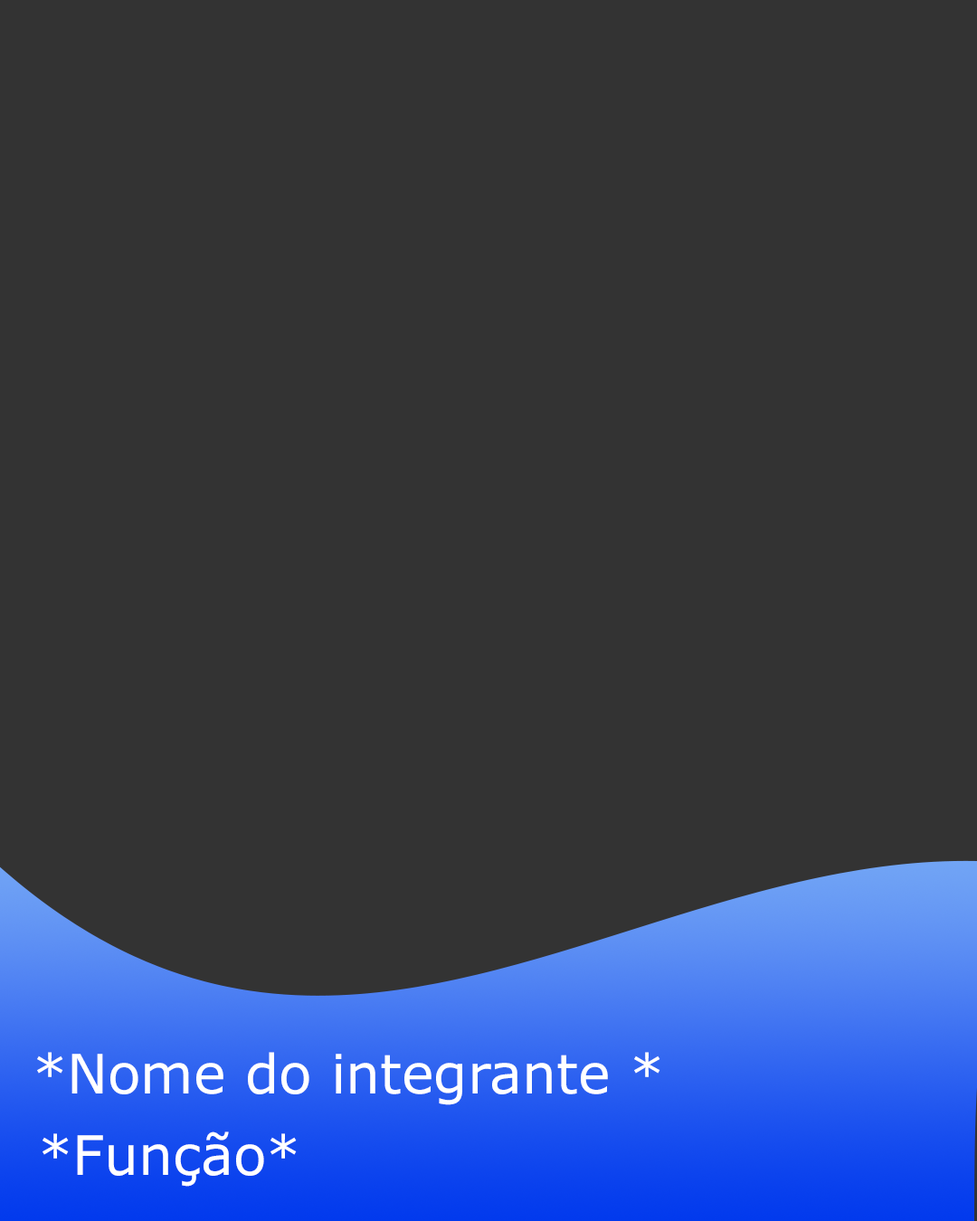
<style>
.page{position:relative;width:977px;height:1221px;background:#333333}
.page>*{position:absolute;margin:0}
.t1{font:54.3px "Verdana";color:#ffffff}
</style>
<div class="page">
<p class="t1" style="left:37px;top:1052px;width:623px;height:53px">*Nome do integrante *</p>
<p class="t1" style="left:43px;top:1131px;width:254px;height:56px">*Função*</p>
</div>
